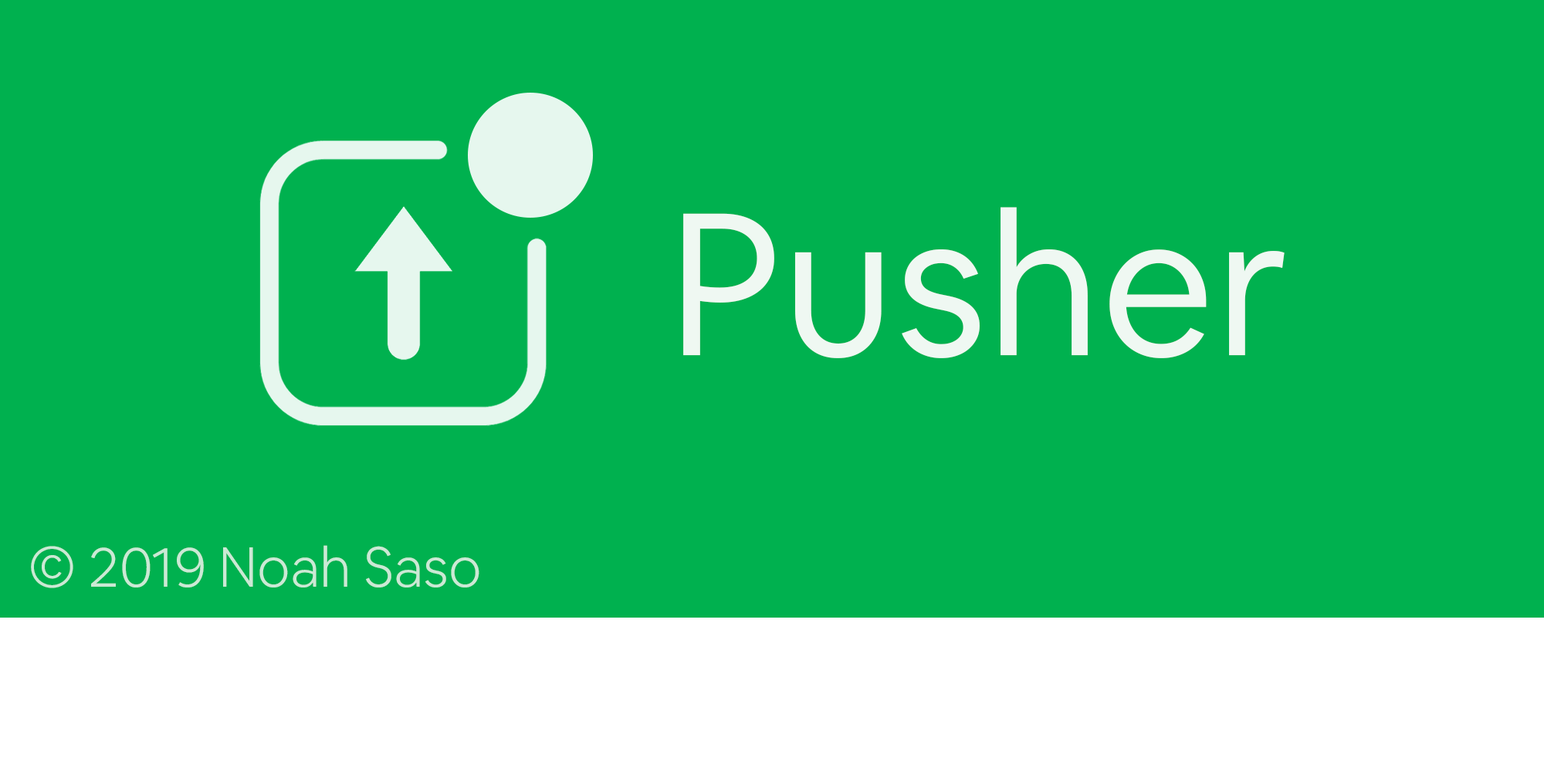
<style>
.page{position:relative;width:1544px;height:772px;background:#00b14f}
.page>*{position:absolute;margin:0}
.t1{font:199.5px "AirbnbCerealApp-Book";color:#ffffff}
.t2{font:55.6px "AirbnbCerealApp-Light";color:#cbe9d5}
</style>
<div class="page">
<p class="t1" style="left:683px;top:207px;width:602px;height:151px;opacity:0.9">Pusher</p>
<p class="t2" style="left:31px;top:545px;width:449px;height:43px">© 2019 Noah Saso</p>
</div>
